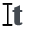
<style>
.page{position:relative;width:32px;height:32px;background:#ffffff}
.page>*{position:absolute;margin:0}
.t1{font:30px "BritannicBold";color:#444a51}
</style>
<div class="page">
<p class="t1" style="left:12px;top:5px;width:11px;height:21px">t</p>
</div>
